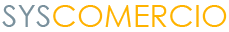
<style>
.page{position:relative;width:229px;height:32px;background:#ffffff}
.page>*{position:absolute;margin:0}
.t1{font:31.2px "CenturyGothic";color:#ffb300}
.t2{font:31.2px "CenturyGothic";color:#7a919d}
.t3{font:31.2px "CenturyGothic";color:#ffb100}
</style>
<div class="page">
<p class="t1" style="left:2px;top:5px;width:225px;height:22px"><span class="t2">SYS</span><span class="t3">CO</span>MERCIO</p>
</div>
